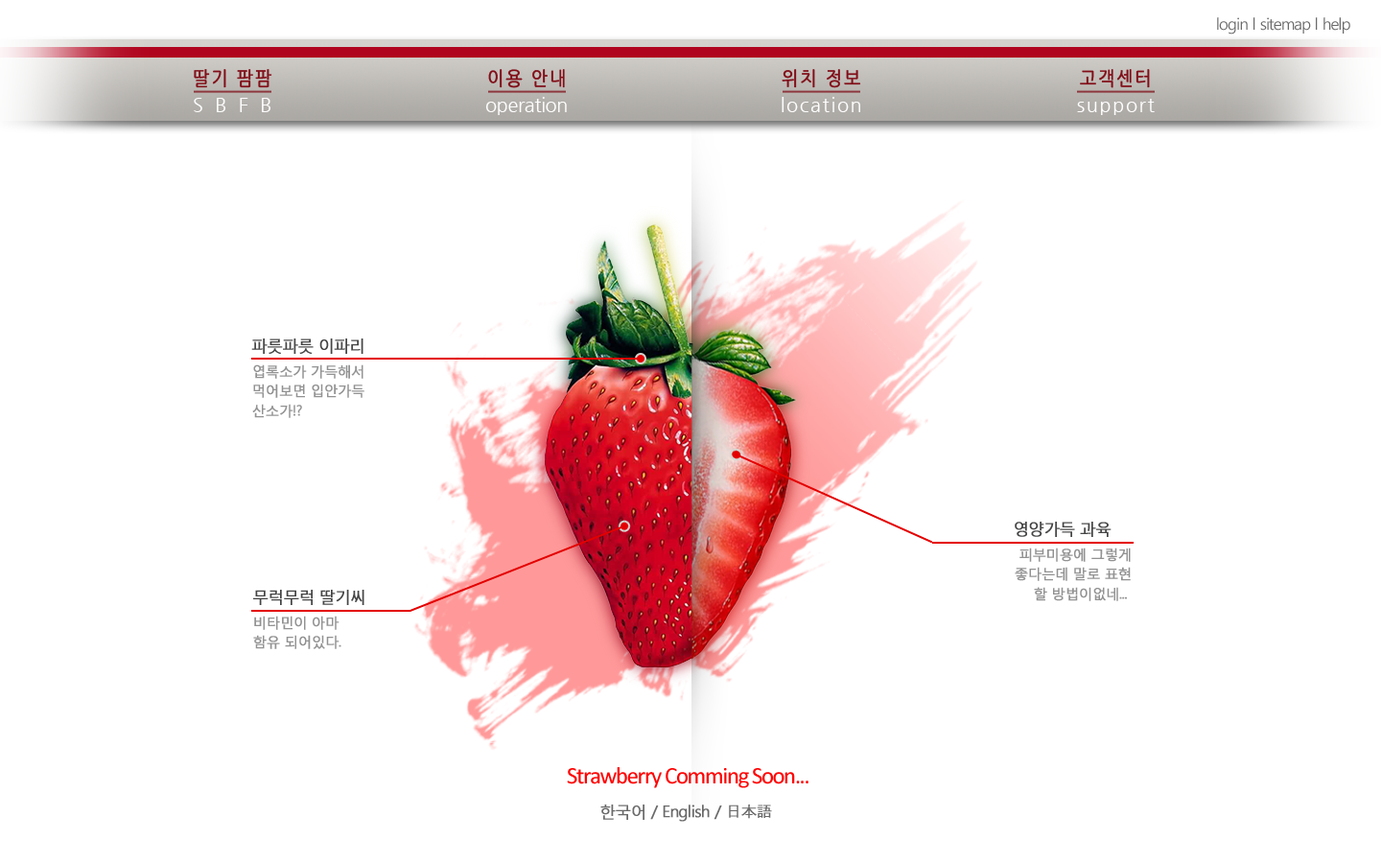
<style>
.page{position:relative;width:1381px;height:863px;background:#ffffff}
.page>*{position:absolute;margin:0}
.t1{font:16px "MalgunGothicRegular";letter-spacing:-0.06em;color:#6a6a6a}
.t2{font:19.2px "NanumGothic";letter-spacing:0.1em;color:#810e18;font-weight:bold;scale:0.9 1}
.t3{font:19.2px "NanumGothic";letter-spacing:0.62em;color:#fffefe;text-transform:uppercase}
.t4{font:19.2px "NanumGothic";letter-spacing:-0.02em;color:#fffefe}
.t5{font:19.2px "NanumGothic";letter-spacing:0.08em;color:#fffefe}
.t6{font:16px "MalgunGothicRegular";letter-spacing:-0.06em;color:#454545;font-weight:bold}
.t7{font:14px/20px "MalgunGothicRegular";letter-spacing:-0.06em;color:#929292;font-weight:bold}
.t8{font:24px "Calibri";letter-spacing:-0.06em;color:#ff0000}
.t9{font:16px "MalgunGothicRegular";letter-spacing:-0.06em;color:#6a6a6a;font-weight:bold}
.t10{font:16px "Gulim";letter-spacing:-0.06em;color:#6a6a6a;font-weight:bold}
</style>
<div class="page">
<p class="t1" style="left:1217px;top:17px;width:134px;height:18px">login l sitemap l help</p>
<p class="t2" style="left:194px;top:69px;width:78px;height:19px">딸기 팜팜</p>
<p class="t2" style="left:488px;top:69px;width:77px;height:19px">이용 안내</p>
<p class="t2" style="left:782px;top:69px;width:79px;height:19px">위치 정보</p>
<p class="t2" style="left:1080px;top:69px;width:70px;height:19px">고객센터</p>
<p class="t3" style="left:194px;top:98px;width:76px;height:14px">sbfb</p>
<p class="t4" style="left:485px;top:97px;width:82px;height:18px">operation</p>
<p class="t5" style="left:782px;top:97px;width:78px;height:15px">location</p>
<p class="t5" style="left:1077px;top:99px;width:78px;height:16px">support</p>
<p class="t6" style="left:251px;top:339px;width:113px;height:15px">파릇파릇 이파리</p>
<p class="t7" style="left:252px;top:365px;width:113px;height:53px">엽록소가 가득해서<br>먹어보면 입안가득 <br>산소가!?</p>
<p class="t6" style="left:1015px;top:522px;width:97px;height:15px">영양가득 과육</p>
<p class="t7" style="left:1015px;top:548px;width:116px;height:53px;text-align:right">피부미용에 그렇게<br>좋다는데 말로 표현<br>할 방법이없네...</p>
<p class="t6" style="left:253px;top:590px;width:112px;height:15px">무럭무럭 딸기씨</p>
<p class="t7" style="left:253px;top:616px;width:88px;height:33px">비타민이 아마 <br>함유 되어있다.</p>
<p class="t8" style="left:567px;top:767px;width:242px;height:21px">Strawberry Comming Soon...</p>
<p class="t9" style="left:600px;top:805px;width:172px;height:17px">한국어 / English / <span class="t10">日本語</span></p>
</div>
